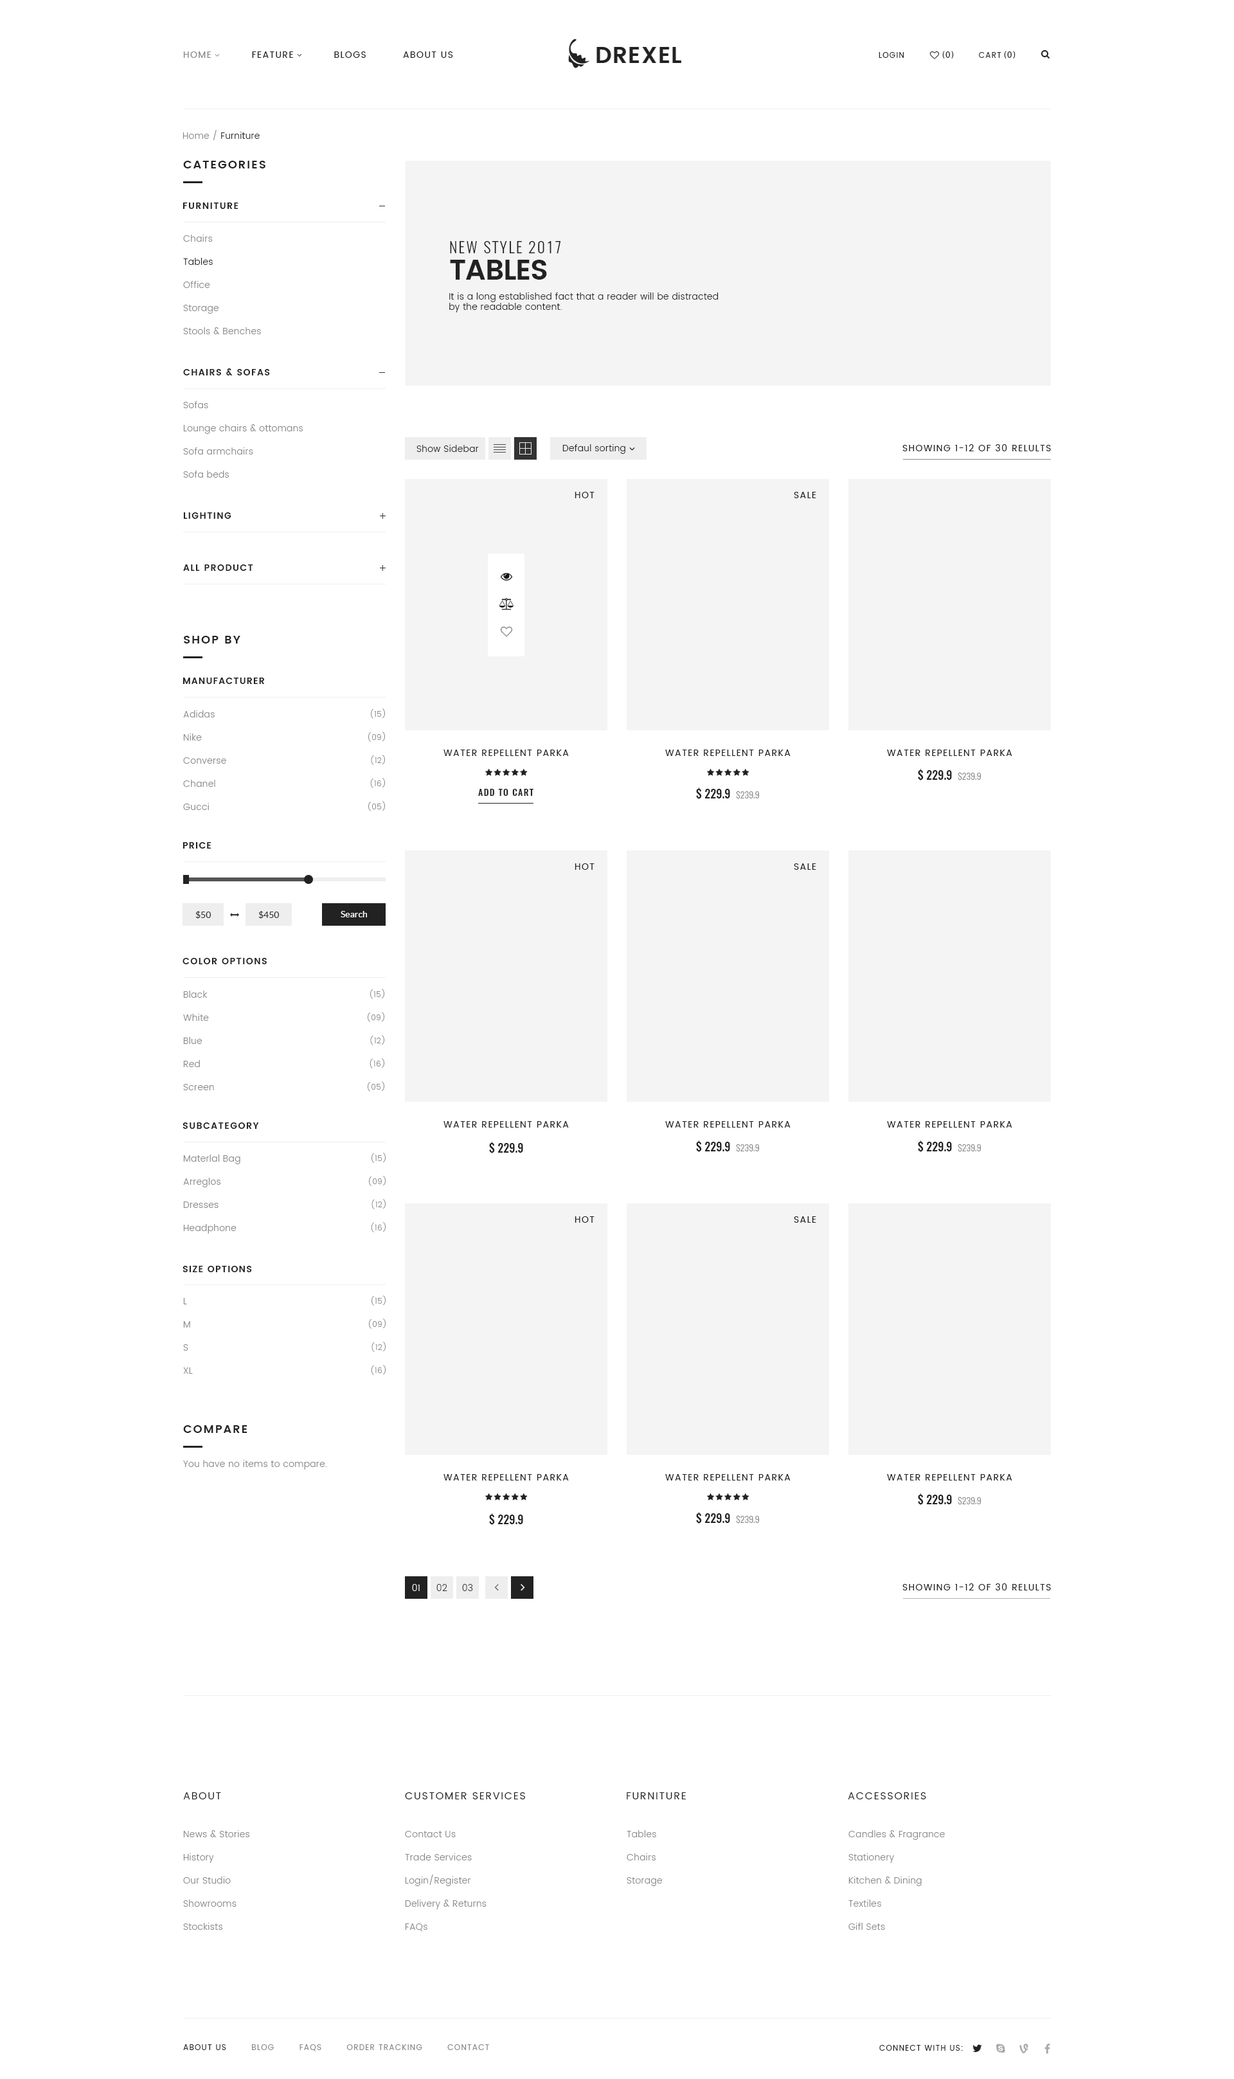
<style>
.page{position:relative;width:1234px;height:2079px;background:#ffffff}
.page>*{position:absolute;margin:0}
.t1{font:9px "Poppins-Regular";letter-spacing:0.1em;color:#222222;text-transform:uppercase}
.t2{font:9px "Poppins-Regular";letter-spacing:0.1em;color:#888888;text-transform:uppercase}
.t3{font:7.7px "Poppins-Regular";letter-spacing:0.1em;color:#222222;text-transform:uppercase}
.t4{font:9px "MyriadPro-Regular";letter-spacing:0.1em;color:#222222;text-transform:uppercase}
.t5{font:9px "Poppins-Light";letter-spacing:0.025em;color:#222222}
.t6{font:9px "Poppins-Light";letter-spacing:0.025em;color:#888888}
.t7{font:11.6px "Poppins-SemiBold";letter-spacing:0.1em;color:#222222;text-transform:uppercase}
.t8{font:9px "Poppins-SemiBold";letter-spacing:0.1em;color:#222222;text-transform:uppercase}
.t9{font:9px/23.1px "Poppins-Light";letter-spacing:0.025em;color:#888888}
.t10{font:9px/23.1px "Poppins-Light";letter-spacing:0.025em;color:#222222}
.t11{font:15.4px "Oswald-Light";letter-spacing:0.1em;color:#222222;text-transform:uppercase}
.t12{font:28.7px "Poppins-SemiBold";letter-spacing:-0.025em;color:#222222;text-transform:uppercase}
.t13{font:7.7px/23.1px "Poppins-Light";letter-spacing:0.025em;color:#888888}
.t14{font:11.6px "Oswald-Medium";color:#222222}
.t15{font:9px "Oswald-Light";color:#888888}
.t16{font:9px "Oswald-Medium";letter-spacing:0.1em;color:#222222;text-transform:uppercase}
.t17{font:9px "Lato-Regular";color:#333333}
.t18{font:9px "Lato-Regular";color:#ffffff}
.t19{font:9.2px "Poppins-SemiBold";letter-spacing:0.1em;color:#222222;text-transform:uppercase}
.t20{font:9px "Poppins-Light";letter-spacing:0.025em;color:#eeeeee;text-transform:uppercase}
.t21{font:9px "Poppins-Light";letter-spacing:0.025em;color:#333333;text-transform:uppercase}
.t22{font:10.3px "Poppins-Regular";letter-spacing:0.1em;color:#222222;text-transform:uppercase}
.t23{font:7.7px "Poppins-Regular";letter-spacing:0.1em;color:#888888;text-transform:uppercase}
</style>
<div class="page">
<p class="t1" style="left:183px;top:51px;width:270px;height:7px"><span class="t2">Home</span>           Feature           Blogs          About Us</p>
<p class="t3" style="left:879px;top:52px;width:26px;height:6px">Login</p>
<p class="t4" style="left:942px;top:51px;width:12px;height:8px">(0)</p>
<p class="t3" style="left:979px;top:52px;width:23px;height:6px">Cart</p>
<p class="t4" style="left:1004px;top:51px;width:12px;height:8px">(0)</p>
<p class="t5" style="left:183px;top:130px;width:77px;height:10px"><span class="t6">Home / </span>Furniture</p>
<p class="t7" style="left:183px;top:161px;width:83px;height:7px">categories</p>
<p class="t8" style="left:183px;top:203px;width:56px;height:6px">Furniture</p>
<p class="t9" style="left:183px;top:235px;width:78px;height:99px">Chairs<span class="t10"><br>Tables<br></span>Office<br>Storage<br>Stools &amp; Benches</p>
<p class="t11" style="left:450px;top:241px;width:111px;height:12px">New Style 2017</p>
<p class="t12" style="left:450px;top:260px;width:97px;height:20px">Tables</p>
<p class="t5" style="left:449px;top:292px;width:270px;height:20px;text-align:right">It is a long established fact that a reader will be distracted by the readable content.</p>
<p class="t8" style="left:183px;top:368px;width:87px;height:7px">Chairs &amp; sofas</p>
<p class="t9" style="left:183px;top:401px;width:120px;height:77px">Sofas<br>Lounge chairs &amp; ottomans<br>Sofa armchairs<br>Sofa beds</p>
<p class="t5" style="left:417px;top:445px;width:62px;height:7px">Show Sidebar</p>
<p class="t5" style="left:562px;top:444px;width:64px;height:10px">Defaul sorting</p>
<p class="t1" style="left:903px;top:444px;width:148px;height:7px">Showing 1-12 of 30 relults</p>
<p class="t1" style="left:575px;top:492px;width:20px;height:6px">Hot</p>
<p class="t1" style="left:794px;top:492px;width:22px;height:6px">SAle</p>
<p class="t8" style="left:183px;top:512px;width:48px;height:7px">Lighting</p>
<p class="t8" style="left:183px;top:564px;width:70px;height:7px">All Product</p>
<p class="t7" style="left:184px;top:636px;width:56px;height:8px">Shop by</p>
<p class="t8" style="left:183px;top:678px;width:82px;height:6px">Manufacturer</p>
<p class="t9" style="left:183px;top:710px;width:43px;height:100px">Adidas<br>Nike<br>Converse<br>Chanel<br>Gucci</p>
<p class="t13" style="left:368px;top:708px;width:17px;height:103px;text-align:right">(15)<br>(09)<br>(12)<br>(16)<br>(05)</p>
<p class="t1" style="left:444px;top:750px;width:125px;height:6px">Water Repellent Parka</p>
<p class="t1" style="left:665px;top:750px;width:126px;height:6px">Water Repellent Parka</p>
<p class="t1" style="left:887px;top:750px;width:126px;height:6px">Water Repellent Parka</p>
<p class="t14" style="left:918px;top:769px;width:64px;height:12px">$ 229.9  <span class="t15">$239.9</span></p>
<p class="t16" style="left:478px;top:789px;width:56px;height:7px">Add to cart</p>
<p class="t14" style="left:696px;top:788px;width:64px;height:12px">$ 229.9  <span class="t15">$239.9</span></p>
<p class="t8" style="left:183px;top:842px;width:29px;height:7px">PriCe</p>
<p class="t1" style="left:575px;top:863px;width:20px;height:7px">Hot</p>
<p class="t1" style="left:794px;top:863px;width:22px;height:7px">SAle</p>
<p class="t17" style="left:195px;top:911px;width:17px;height:8px">$50</p>
<p class="t17" style="left:258px;top:911px;width:22px;height:8px">$450</p>
<p class="t18" style="left:341px;top:911px;width:26px;height:6px">Search</p>
<p class="t19" style="left:183px;top:958px;width:84px;height:6px">color options</p>
<p class="t13" style="left:368px;top:989px;width:16px;height:103px;text-align:right">(15)<br>(09)<br>(12)<br>(16)<br>(05)</p>
<p class="t9" style="left:183px;top:991px;width:31px;height:99px">Black<br>White<br>Blue<br>Red<br>Screen</p>
<p class="t1" style="left:444px;top:1121px;width:125px;height:7px">Water Repellent Parka</p>
<p class="t1" style="left:665px;top:1121px;width:126px;height:7px">Water Repellent Parka</p>
<p class="t1" style="left:887px;top:1121px;width:126px;height:7px">Water Repellent Parka</p>
<p class="t19" style="left:183px;top:1122px;width:76px;height:7px">Subcategory</p>
<p class="t14" style="left:489px;top:1142px;width:34px;height:12px">$ 229.9</p>
<p class="t14" style="left:696px;top:1140px;width:64px;height:13px">$ 229.9  <span class="t15">$239.9</span></p>
<p class="t14" style="left:918px;top:1140px;width:64px;height:13px">$ 229.9  <span class="t15">$239.9</span></p>
<p class="t9" style="left:183px;top:1155px;width:57px;height:79px">Materlal Bag<br>Arreglos<br>Dresses<br>Headphone</p>
<p class="t13" style="left:369px;top:1153px;width:17px;height:79px;text-align:right">(15)<br>(09)<br>(12)<br>(16)</p>
<p class="t1" style="left:575px;top:1216px;width:20px;height:7px">Hot</p>
<p class="t1" style="left:794px;top:1216px;width:22px;height:7px">SAle</p>
<p class="t8" style="left:183px;top:1266px;width:69px;height:6px">Size options</p>
<p class="t9" style="left:183px;top:1298px;width:10px;height:76px">L<br>M<br>S<br>XL</p>
<p class="t13" style="left:369px;top:1295px;width:17px;height:80px;text-align:right">(15)<br>(09)<br>(12)<br>(16)</p>
<p class="t7" style="left:183px;top:1425px;width:65px;height:8px">Compare</p>
<p class="t6" style="left:183px;top:1460px;width:144px;height:10px">You have no items to compare.</p>
<p class="t1" style="left:444px;top:1474px;width:125px;height:6px">Water Repellent Parka</p>
<p class="t1" style="left:665px;top:1474px;width:126px;height:6px">Water Repellent Parka</p>
<p class="t1" style="left:887px;top:1474px;width:126px;height:6px">Water Repellent Parka</p>
<p class="t14" style="left:918px;top:1493px;width:64px;height:13px">$ 229.9  <span class="t15">$239.9</span></p>
<p class="t14" style="left:489px;top:1513px;width:34px;height:13px">$ 229.9</p>
<p class="t14" style="left:696px;top:1512px;width:64px;height:12px">$ 229.9  <span class="t15">$239.9</span></p>
<p class="t20" style="left:412px;top:1584px;width:8px;height:7px">01</p>
<p class="t21" style="left:437px;top:1584px;width:10px;height:7px">02</p>
<p class="t21" style="left:462px;top:1584px;width:11px;height:7px">03</p>
<p class="t1" style="left:903px;top:1583px;width:148px;height:7px">Showing 1-12 of 30 relults</p>
<p class="t22" style="left:183px;top:1792px;width:38px;height:7px">About</p>
<p class="t22" style="left:405px;top:1792px;width:120px;height:7px">Customer services</p>
<p class="t22" style="left:627px;top:1792px;width:59px;height:7px">Furniture</p>
<p class="t22" style="left:848px;top:1792px;width:78px;height:7px">Accessories</p>
<p class="t9" style="left:183px;top:1830px;width:66px;height:100px">News &amp; Stories<br>History<br>Our Studio<br>Showrooms<br>Stockists</p>
<p class="t9" style="left:405px;top:1831px;width:82px;height:100px">Contact Us<br>Trade Services<br>Login/Register<br>Delivery &amp; Returns<br>FAQs</p>
<p class="t9" style="left:627px;top:1830px;width:35px;height:56px">Tables<br>Chairs<br>Storage</p>
<p class="t9" style="left:849px;top:1830px;width:96px;height:100px">Candles &amp; Fragrance<br>Stationery<br>Kitchen &amp; Dining<br>Textiles<br>Gifl Sets</p>
<p class="t23" style="left:183px;top:2044px;width:306px;height:7px"><span class="t3">About Us</span>        Blog        FAQs        Order Tracking        Contact</p>
<p class="t3" style="left:879px;top:2045px;width:84px;height:6px">Connect with us:</p>
</div>
